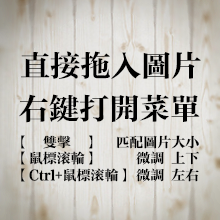
<style>
.page{position:relative;width:220px;height:220px}
.page>*{position:absolute;margin:0}
.t1{font:30.2px "FZCYSFW--GB1-0";color:#000000}
.t2{font:14px "FZCYSFW--GB1-0";color:#000000}
</style>
<div class="page">
<p class="t1" style="left:21px;top:51px;width:180px;height:28px">直接拖入图片</p>
<p class="t1" style="left:19px;top:94px;width:181px;height:29px">右键打开菜单</p>
<p class="t2" style="left:21px;top:135px;width:106px;height:47px">【　双击　】<br>【鼠标滚轮】<br>【Ctrl+鼠标滚轮】</p>
<p class="t2" style="left:116px;top:135px;width:83px;height:47px;text-align:right">匹配图片大小<br>微调 上下<br>微调 左右</p>
</div>
